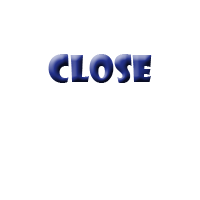
<style>
.page{position:relative;width:200px;height:200px;background:#ffffff}
.page>*{position:absolute;margin:0}
.t1{font:36px "ShowcardGothic-Reg"}
</style>
<div class="page">
<p class="t1" style="left:48px;top:54px;width:104px;height:29px">Close</p>
</div>
